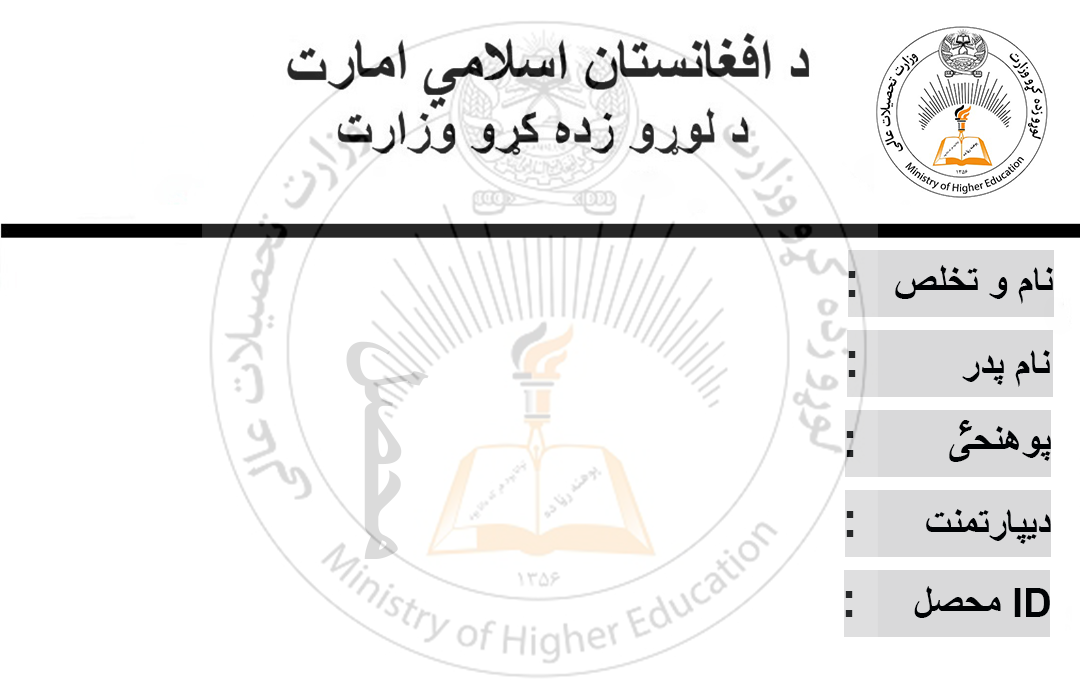
<style>
.page{position:relative;width:1080px;height:680px;background:#ffffff}
.page>*{position:absolute;margin:0}
.t1{font:40px "Arial-BoldMT";color:#000204}
.t2{font:48px "Arial-BoldMT";color:#000204}
.t3{font:48px "Arial-BoldMT";color:#262829}
.t4{font:101.3px "Arial-BoldMT";color:#dbdbdb}
.t5{font:36px "Arial-BoldMT";color:#000204}
.t6{font:48px "Arial-BoldMT";color:#262729}
</style>
<div class="page">
<p class="t1" style="left:895px;top:265px;width:158px;height:39px"><span class="t2">  </span>نام و تخلص</p>
<p class="t3" style="left:848px;top:271px;width:8px;height:26px">:</p>
<p class="t4" style="left:346px;top:341px;width:83px;height:218px;rotate:90deg">محصل</p>
<p class="t3" style="left:848px;top:351px;width:8px;height:26px">:</p>
<p class="t1" style="left:962px;top:350px;width:88px;height:37px">نام پدر</p>
<p class="t5" style="left:959px;top:420px;width:14px;height:16px">ء</p>
<p class="t6" style="left:846px;top:431px;width:8px;height:26px">:</p>
<p class="t1" style="left:949px;top:426px;width:102px;height:36px">پوهنحی</p>
<p class="t1" style="left:926px;top:509px;width:125px;height:35px">دیپارتمنت</p>
<p class="t3" style="left:846px;top:511px;width:8px;height:26px">:</p>
<p class="t3" style="left:845px;top:591px;width:8px;height:26px">:</p>
<p class="t1" style="left:914px;top:586px;width:136px;height:32px">محصل ID</p>
</div>
